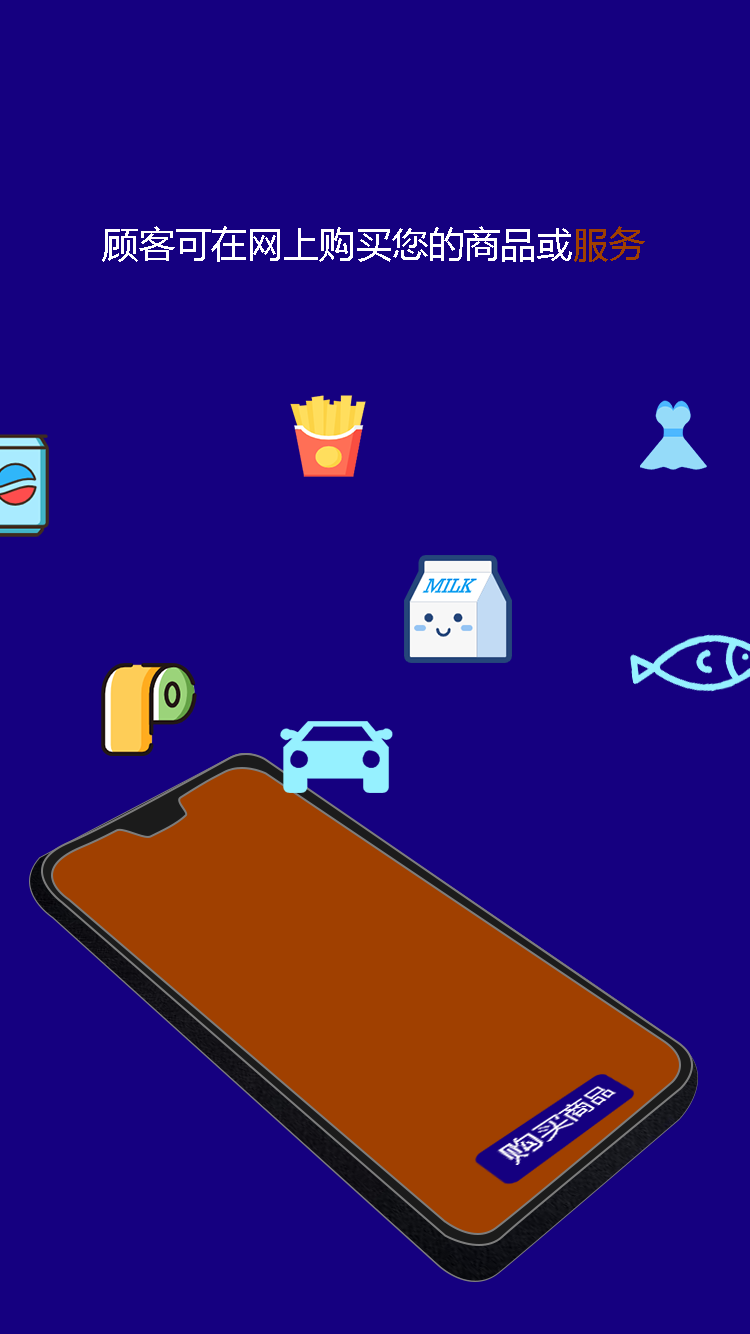
<style>
.page{position:relative;width:750px;height:1334px;background:#150080}
.page>*{position:absolute;margin:0}
.t1{font:36px "MicrosoftYaHei";letter-spacing:0.005em;color:#ffffff}
.t2{font:36px "MicrosoftYaHei";letter-spacing:0.005em;color:#a04000}
</style>
<div class="page">
<p class="t1" style="left:102px;top:226px;width:543px;height:36px">顾客可在网上购买您的商品或<span class="t2">服务</span></p>
</div>
